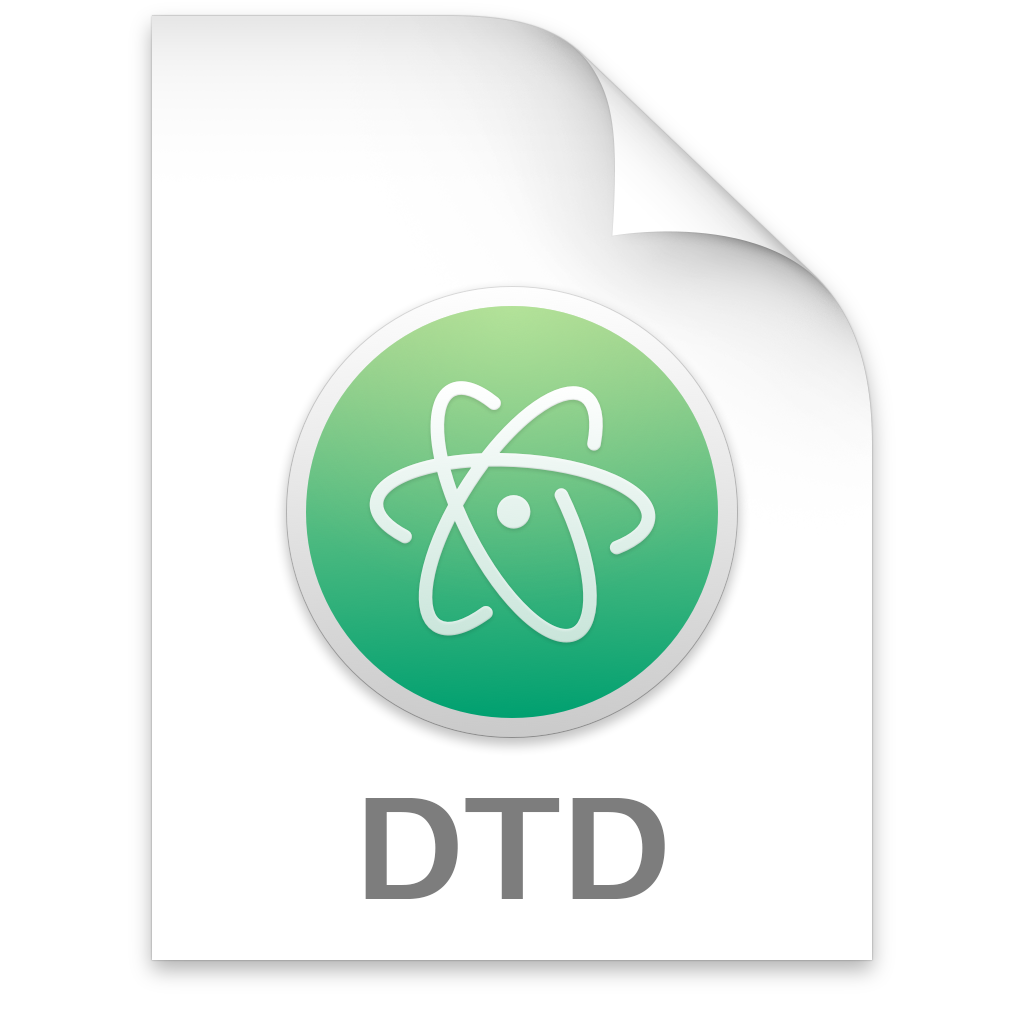
<style>
.page{position:relative;width:1024px;height:1024px;background:#ffffff}
.page>*{position:absolute;margin:0}
.t1{font:140px "LucidaGrande-Bold";color:#7d7d7d}
</style>
<div class="page">
<p class="t1" style="left:365px;top:798px;width:300px;height:101px">DTD</p>
</div>
